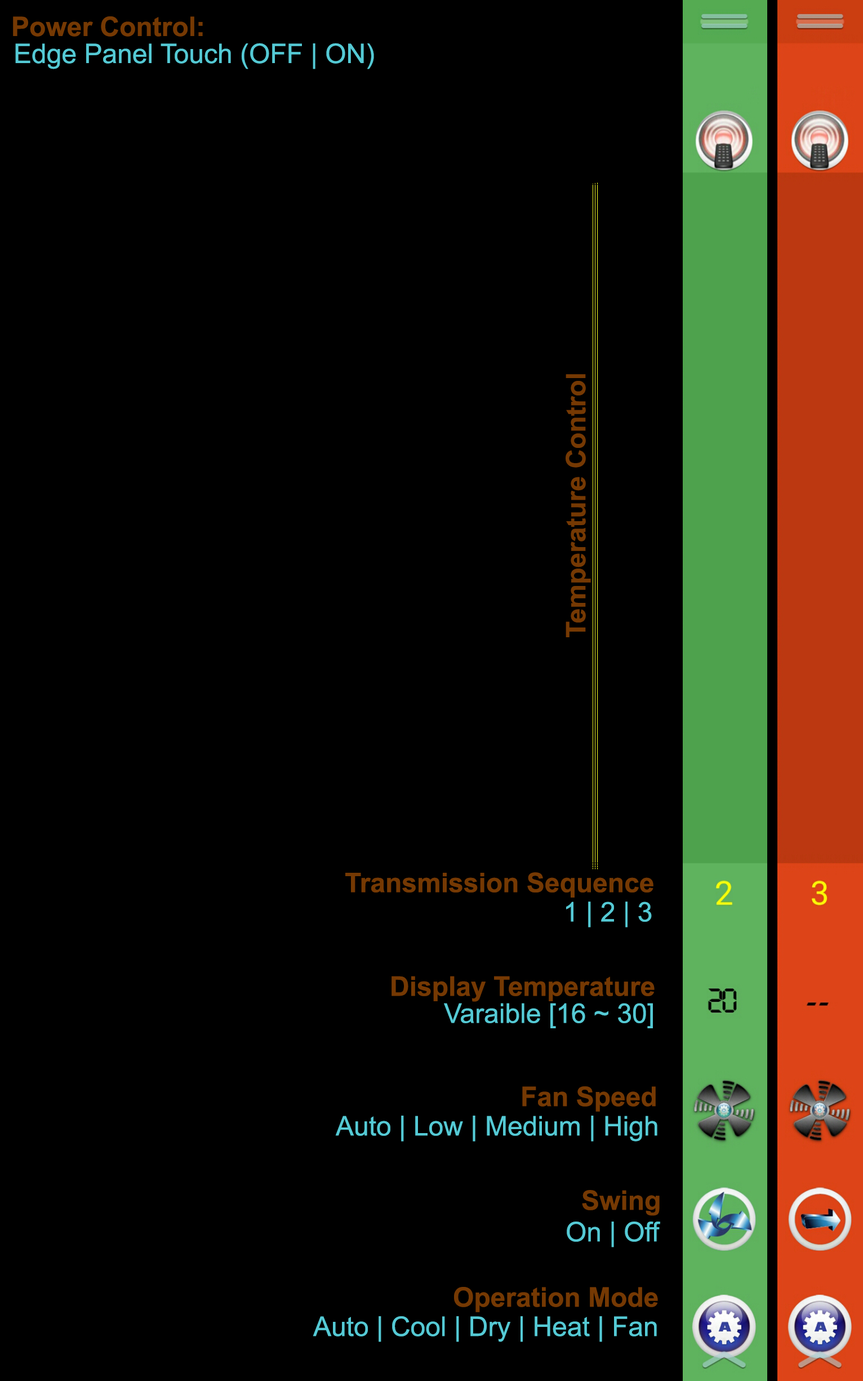
<style>
.page{position:relative;width:863px;height:1381px;background:#000000}
.page>*{position:absolute;margin:0}
.t1{font:27px "Arial-BoldMT";color:#753903}
.t2{font:27px "ArialMT";color:#55cad5}
.t3{font:26.9px "Arial-BoldMT";color:#753903}
</style>
<div class="page">
<p class="t1" style="left:13px;top:16px;width:190px;height:21px">Power Control:</p>
<p class="t2" style="left:15px;top:43px;width:359px;height:26px">Edge Panel Touch (OFF | ON)</p>
<p class="t3" style="left:566px;top:374px;width:25px;height:263px;rotate:-90deg">Temperature Control</p>
<p class="t1" style="left:345px;top:872px;width:309px;height:26px">Transmission Sequence</p>
<p class="t2" style="left:566px;top:902px;width:86px;height:26px">1 | 2 | 3</p>
<p class="t1" style="left:392px;top:976px;width:263px;height:26px">Display Temperature</p>
<p class="t2" style="left:444px;top:1003px;width:209px;height:25px">Varaible [16 ~ 30]</p>
<p class="t1" style="left:522px;top:1086px;width:134px;height:26px">Fan Speed</p>
<p class="t2" style="left:335px;top:1116px;width:323px;height:26px">Auto | Low | Medium | High</p>
<p class="t1" style="left:582px;top:1190px;width:78px;height:26px">Swing</p>
<p class="t2" style="left:567px;top:1222px;width:93px;height:26px">On | Off</p>
<p class="t1" style="left:454px;top:1287px;width:204px;height:25px">Operation Mode</p>
<p class="t2" style="left:313px;top:1316px;width:344px;height:26px">Auto | Cool | Dry | Heat | Fan</p>
</div>
